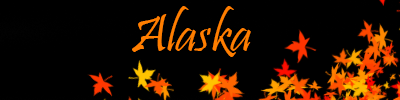
<style>
.page{position:relative;width:400px;height:100px;background:#000000}
.page>*{position:absolute;margin:0}
.t1{font:54px "Pristina-Regular";color:#ff7e00}
</style>
<div class="page">
<p class="t1" style="left:132px;top:6px;width:119px;height:51px">Alaska</p>
</div>
